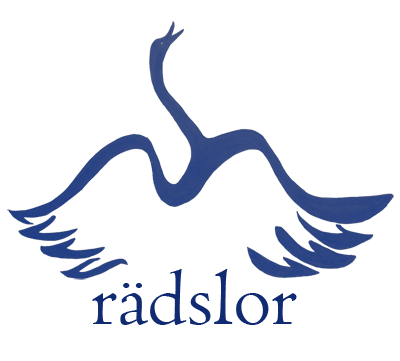
<style>
.page{position:relative;width:400px;height:361px;background:#ffffff}
.page>*{position:absolute;margin:0}
.t1{font:82px "Centaur";color:#112b72}
</style>
<div class="page">
<p class="t1" style="left:92px;top:269px;width:205px;height:56px">rädslor</p>
</div>
